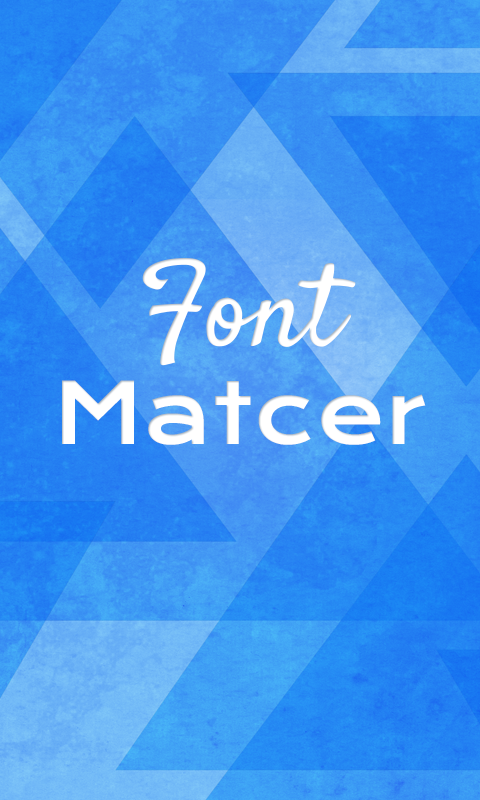
<style>
.page{position:relative;width:480px;height:800px}
.page>*{position:absolute;margin:0}
.t1{font:83.3px "KronaOne-Regular";color:#ffffff}
.t2{font:116.7px "Satisfy";color:#ffffff}
</style>
<div class="page">
<p class="t1" style="left:62px;top:258px;width:364px;height:187px"><span class="t2">Font </span>Matcer</p>
</div>
